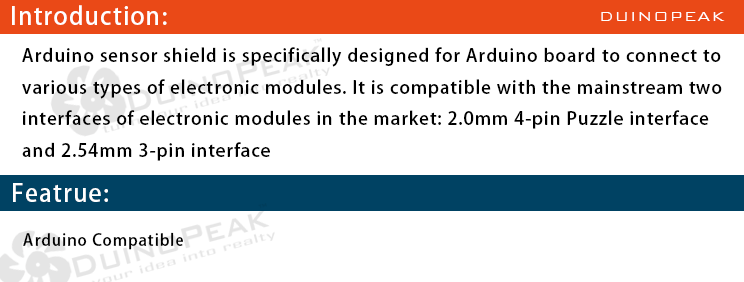
<style>
.page{position:relative;width:744px;height:282px;background:#ffffff}
.page>*{position:absolute;margin:0}
.t1{font:24px "AdobeHeitiStd-Regular";letter-spacing:0.05em;color:#ffffff}
.t2{font:18px "BankGothicBT-Light";letter-spacing:0.05em;color:#ffffff}
.t3{font:18px "AdobeHeitiStd-Regular";letter-spacing:0.05em;color:#000000}
.t4{font:16px "AdobeHeitiStd-Regular";letter-spacing:0.05em;color:#000000}
</style>
<div class="page">
<p class="t1" style="left:12px;top:5px;width:155px;height:20px">Introduction:</p>
<p class="t2" style="left:601px;top:12px;width:124px;height:9px">DUINOPEAK</p>
<p class="t3" style="left:22px;top:47px;width:700px;height:114px">Arduino sensor shield is specifically designed for Arduino board to connect to <br>various types of electronic modules. It is compatible with the mainstream two <br>interfaces of electronic modules in the market: 2.0mm 4-pin Puzzle interface <br>and 2.54mm 3-pin interface</p>
<p class="t1" style="left:13px;top:183px;width:95px;height:19px">Featrue:</p>
<p class="t4" style="left:23px;top:232px;width:160px;height:18px">Arduino Compatible</p>
</div>
